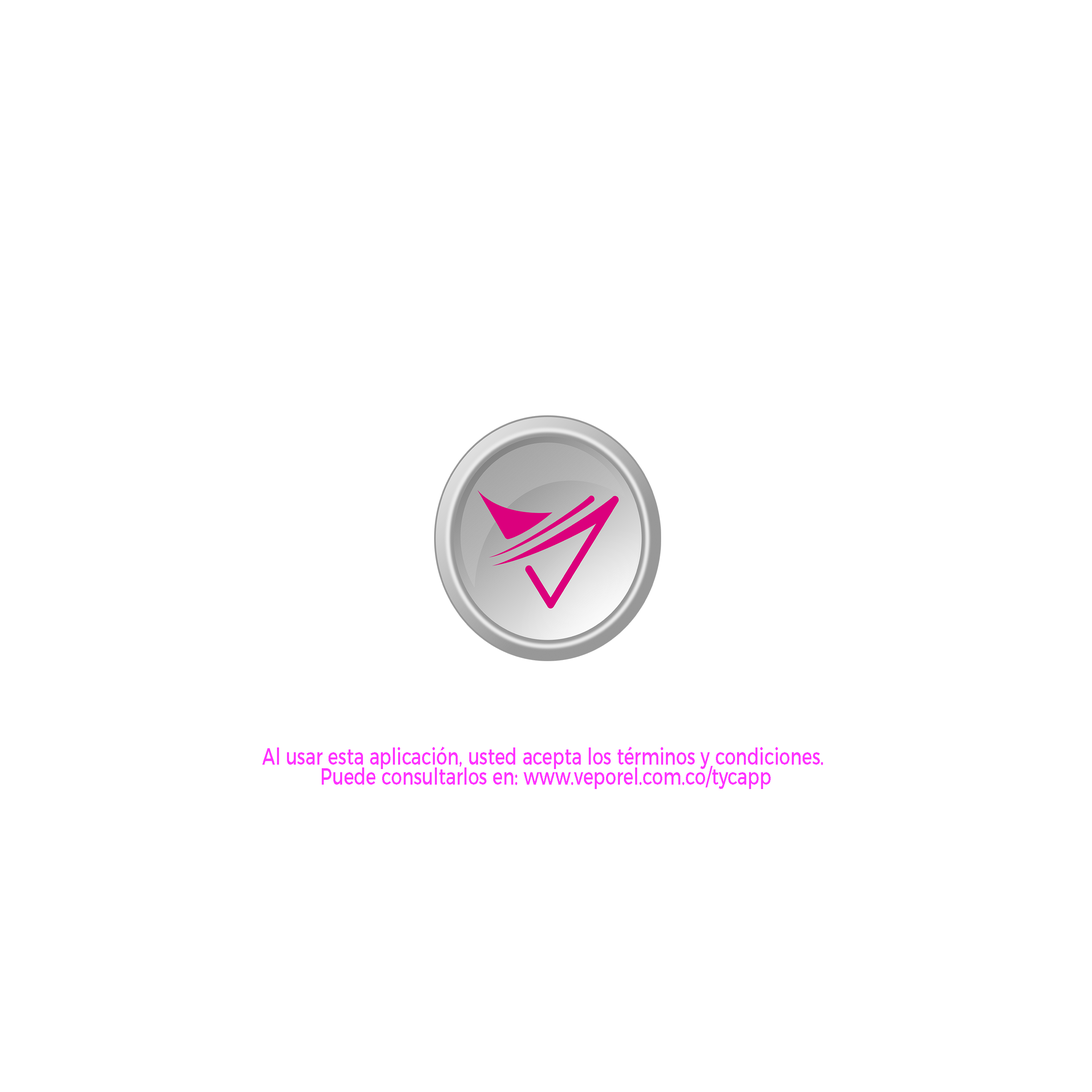
<style>
.page{position:relative;width:1092px;height:1092px;background:#ffffff}
.page>*{position:absolute;margin:0}
.t1{font:23.3px/20px "Montserrat-Regular";color:#ff33ff;scale:0.75 1}
</style>
<div class="page">
<p class="t1" style="left:262px;top:747px;width:561px;height:42px;text-align:center">Al usar esta aplicación, usted acepta los términos y condiciones. <br>Puede consultarlos en: www.veporel.com.co/tycapp</p>
</div>
